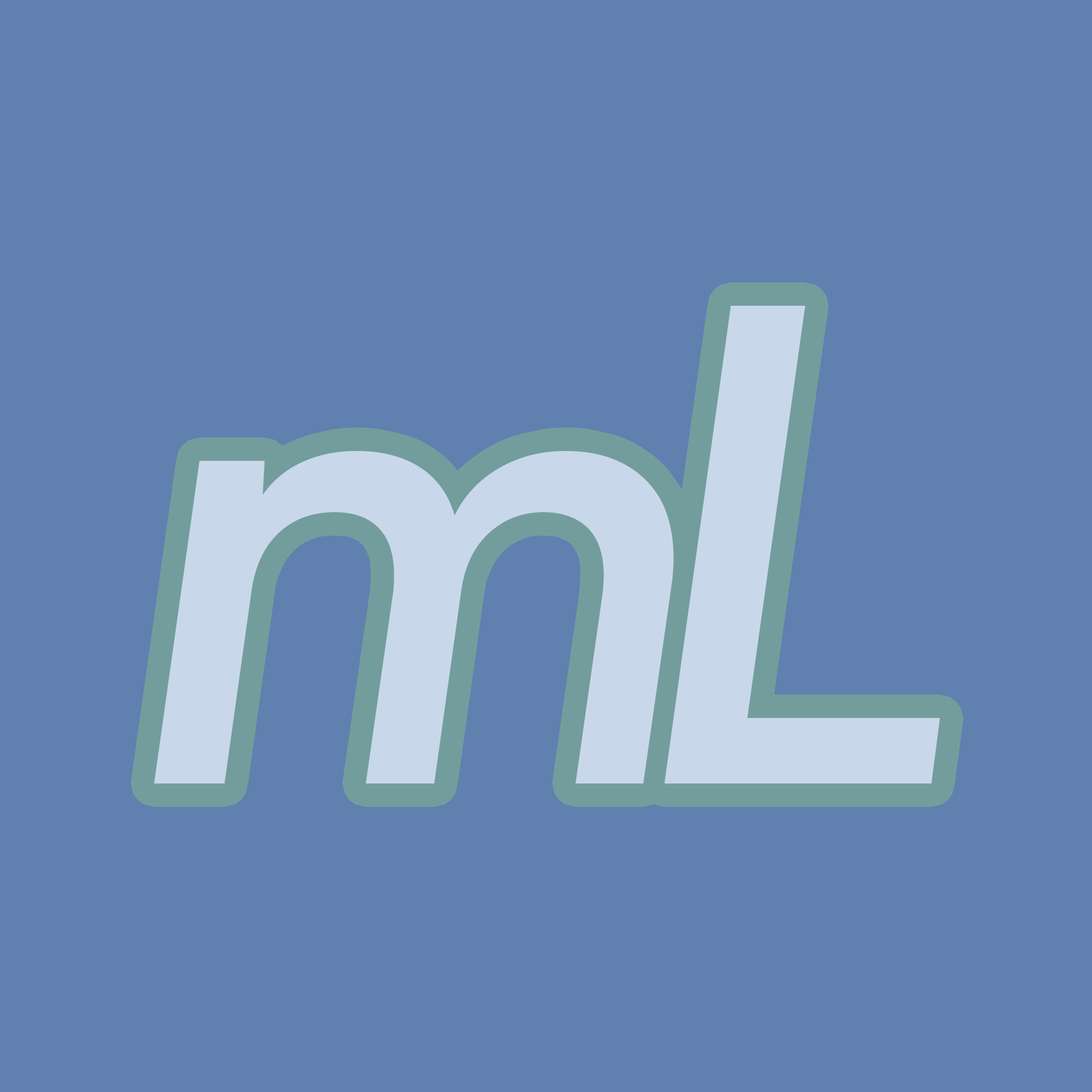
<style>
.page{position:relative;width:1092px;height:1092px;background:#6080b0}
.page>*{position:absolute;margin:0}
.t1{font:657.5px "Biotif-MediumItalic";letter-spacing:-0.1em;color:#c9d7eb}
</style>
<div class="page">
<p class="t1" style="left:154px;top:306px;width:786px;height:477px">mL</p>
</div>
